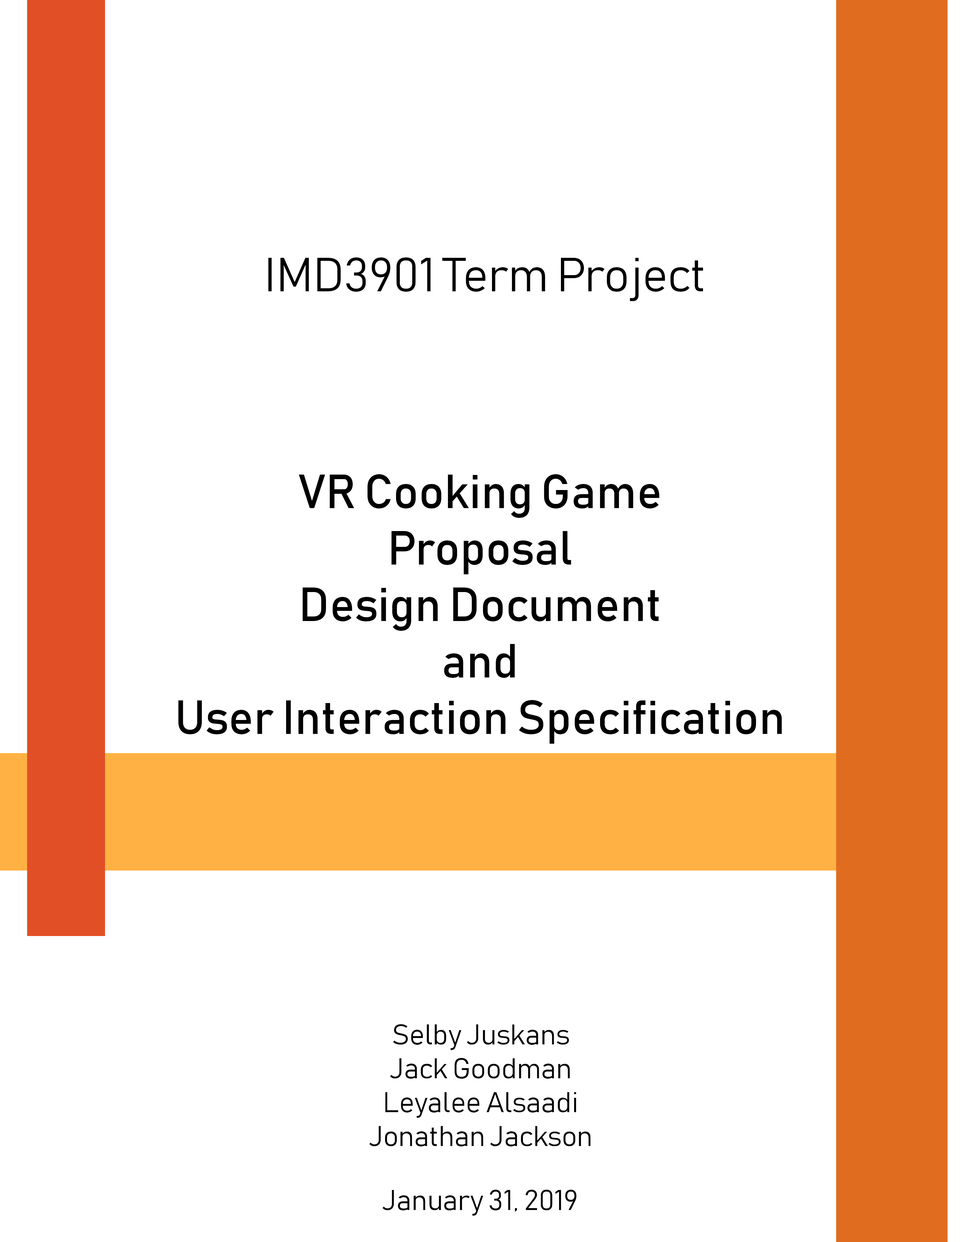
<style>
.page{position:relative;width:960px;height:1242px;background:#ffffff}
.page>*{position:absolute;margin:0}
.t1{font:47.1px "Bahnschrift-Light";color:#000000}
.t2{font:47.1px "Bahnschrift";color:#000000}
.t3{font:28.2px "Bahnschrift-Light";color:#000000}
</style>
<div class="page">
<p class="t1" style="left:268px;top:257px;width:435px;height:44px">IMD3901 Term Project</p>
<p class="t2" style="left:178px;top:474px;width:604px;height:270px;text-align:center">VR Cooking Game<br>Proposal<br>Design Document<br>and<br>User Interaction Specification</p>
<p class="t3" style="left:369px;top:1024px;width:222px;height:123px;text-align:center">Selby Juskans<br>Jack Goodman<br>Leyalee Alsaadi<br>Jonathan Jackson</p>
<p class="t3" style="left:382px;top:1190px;width:195px;height:26px">January 31, 2019</p>
</div>
